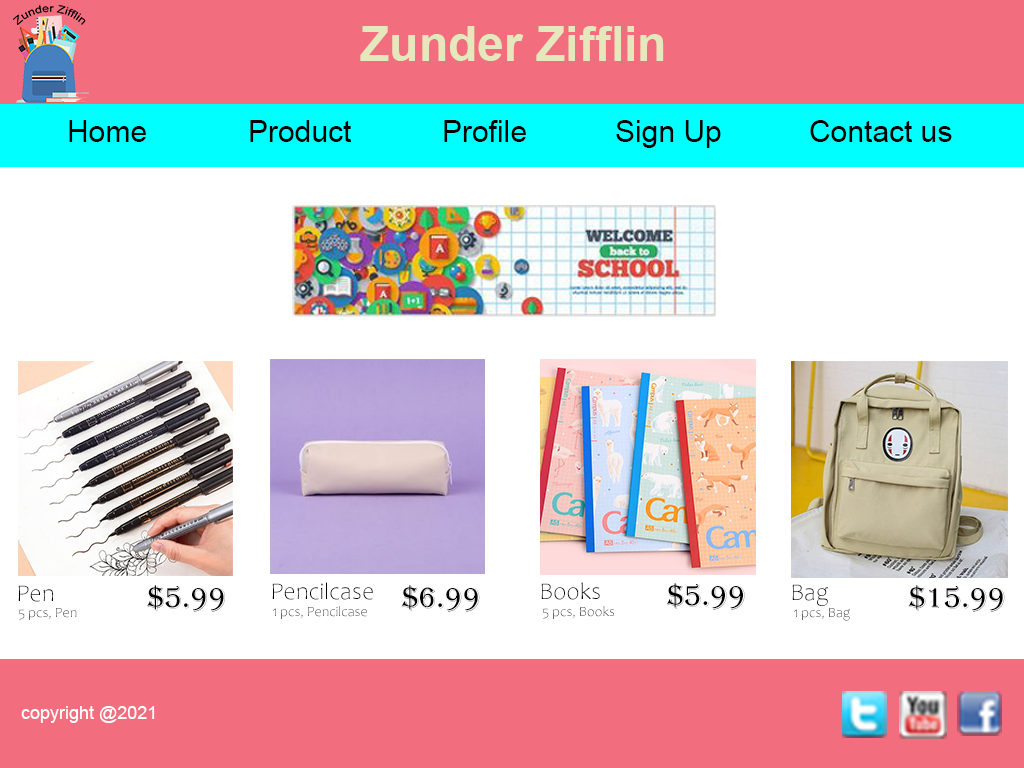
<style>
.page{position:relative;width:1024px;height:768px;background:#ffffff}
.page>*{position:absolute;margin:0}
.t1{font:48px "Arial-BoldMT";color:#e5e8bd}
.t2{font:30px "ArialMT";color:#000000}
.t3{font:24px "Candara-Light";color:#000000}
.t4{font:30px "Algerian";color:#000000}
.t5{font:14px "Candara-Light"}
.t6{font:18px "ArialMT";color:#ffffff}
</style>
<div class="page">
<p class="t1" style="left:360px;top:26px;width:304px;height:35px">Zunder Zifflin</p>
<p class="t2" style="left:69px;top:120px;width:77px;height:22px">Home</p>
<p class="t2" style="left:250px;top:120px;width:101px;height:22px">Product</p>
<p class="t2" style="left:444px;top:120px;width:82px;height:22px">Profile</p>
<p class="t2" style="left:616px;top:120px;width:105px;height:28px">Sign Up</p>
<p class="t2" style="left:810px;top:120px;width:142px;height:22px">Contact us</p>
<p class="t3" style="left:272px;top:582px;width:101px;height:18px">Pencilcase</p>
<p class="t3" style="left:541px;top:582px;width:59px;height:18px">Books</p>
<p class="t3" style="left:18px;top:585px;width:35px;height:17px">Pen</p>
<p class="t4" style="left:147px;top:585px;width:78px;height:27px">$5.99</p>
<p class="t4" style="left:401px;top:585px;width:79px;height:27px">$6.99</p>
<p class="t4" style="left:667px;top:583px;width:78px;height:27px">$5.99</p>
<p class="t3" style="left:792px;top:584px;width:36px;height:22px">Bag</p>
<p class="t4" style="left:908px;top:585px;width:97px;height:27px">$15.99</p>
<p class="t5" style="left:273px;top:606px;width:94px;height:13px">1 pcs, Pencilcase</p>
<p class="t5" style="left:543px;top:606px;width:71px;height:13px">5 pcs, Books</p>
<p class="t5" style="left:19px;top:608px;width:58px;height:12px">5 pcs, Pen</p>
<p class="t5" style="left:794px;top:608px;width:56px;height:13px">1 pcs, Bag</p>
<p class="t6" style="left:21px;top:706px;width:134px;height:17px">copyright @2021</p>
</div>
